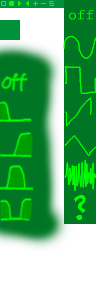
<style>
.page{position:relative;width:96px;height:300px;background:#007524}
.page>*{position:absolute;margin:0}
.t1{font:14px "CourierNewPSMT";color:#00ff00;font-weight:bold}
</style>
<div class="page">
<p class="t1" style="left:69px;top:10px;width:25px;height:10px">off</p>
</div>
